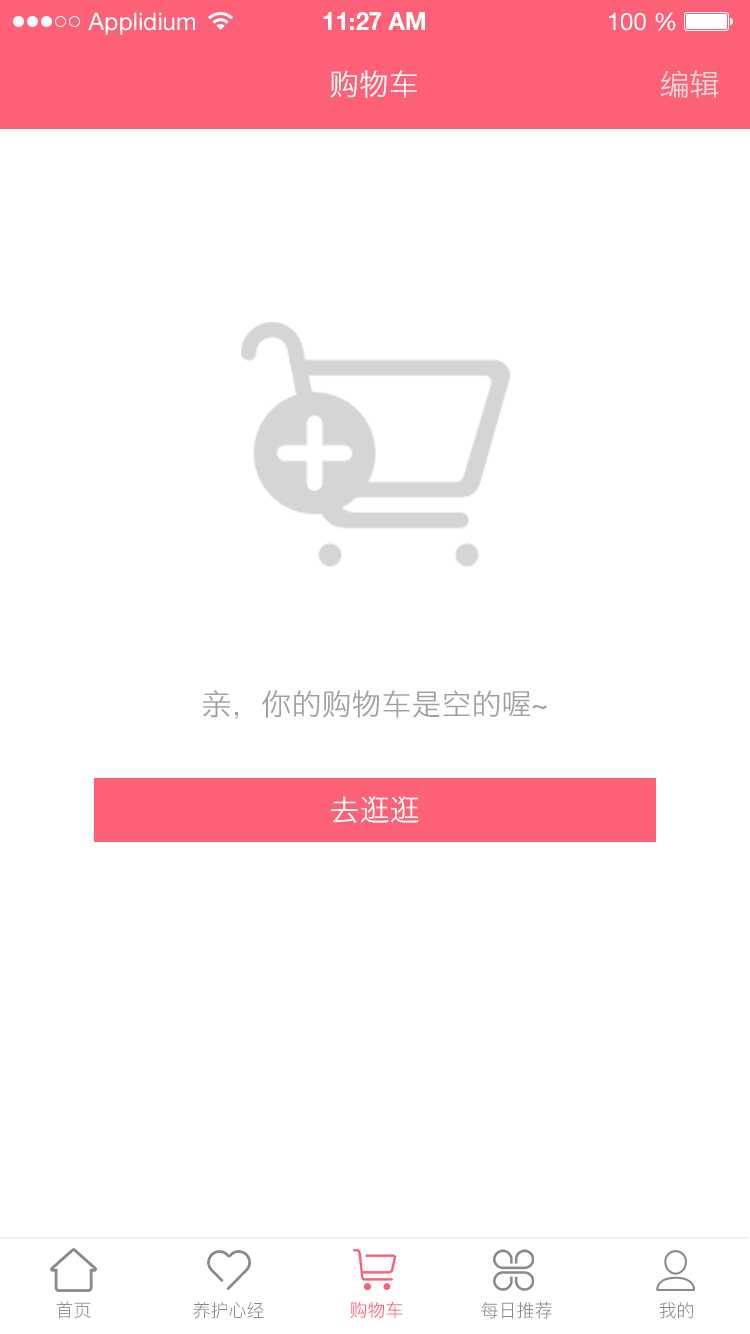
<style>
.page{position:relative;width:750px;height:1334px;background:#ffffff}
.page>*{position:absolute;margin:0}
.t1{font:24px "HelveticaNeueLTStd-Roman";color:#ffffff}
.t2{font:24px "HelveticaNeueLTStd-Bd";color:#ffffff}
.t3{font:30px "HiraginoSansGB-W3";color:#fbfbfb}
.t4{font:30px "HiraginoSansGB-W3";color:#dcd8d8}
.t5{font:30px "HiraginoSansGB-W3";color:#a0a0a0}
.t6{font:30px "HiraginoSansGB-W3";color:#fffefe}
.t7{font:18px "HiraginoSansGB-W3";color:#979797}
.t8{font:18px "PingFang-SC-Regular";color:#8a8a8a}
.t9{font:18px "HiraginoSansGB-W3";color:#fc6177}
</style>
<div class="page">
<p class="t1" style="left:88px;top:12px;width:107px;height:23px">Applidium</p>
<p class="t2" style="left:323px;top:12px;width:102px;height:18px">11:27 AM</p>
<p class="t1" style="left:609px;top:12px;width:67px;height:19px">100 %</p>
<p class="t3" style="left:330px;top:70px;width:87px;height:28px">购物车</p>
<p class="t4" style="left:660px;top:70px;width:59px;height:28px">编辑</p>
<p class="t5" style="left:203px;top:690px;width:344px;height:29px">亲，你的购物车是空的喔~</p>
<p class="t6" style="left:331px;top:796px;width:88px;height:28px">去逛逛</p>
<p class="t7" style="left:56px;top:1301px;width:35px;height:18px">首页</p>
<p class="t8" style="left:193px;top:1302px;width:71px;height:17px">养护心经</p>
<p class="t9" style="left:350px;top:1301px;width:53px;height:18px">购物车</p>
<p class="t8" style="left:481px;top:1302px;width:71px;height:17px">每日推荐</p>
<p class="t8" style="left:659px;top:1302px;width:34px;height:17px">我的</p>
</div>
